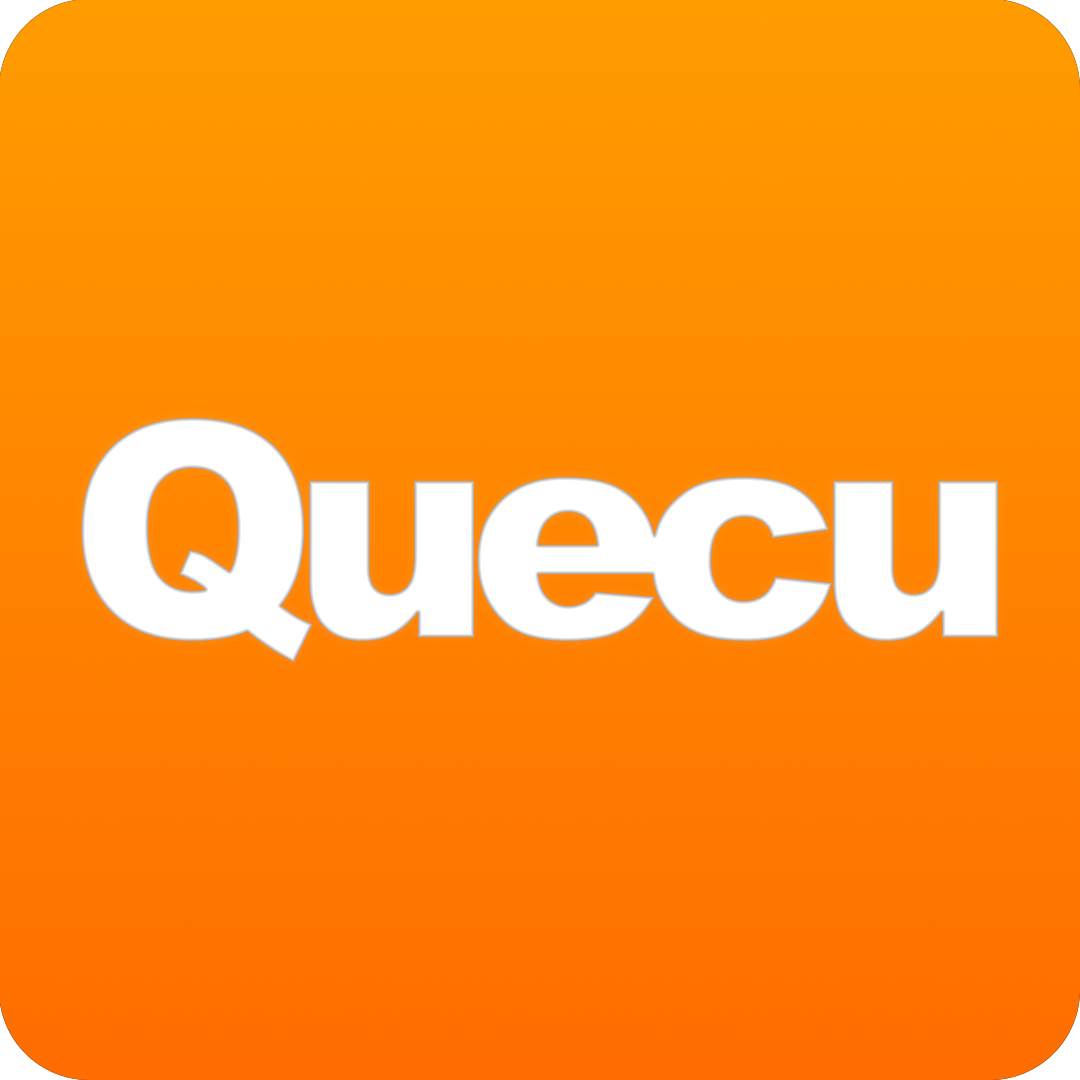
<style>
.page{position:relative;width:1080px;height:1080px}
.page>*{position:absolute;margin:0}
.t1{font:300px "Arial-Black";letter-spacing:-0.085em;color:#ffffff}
</style>
<div class="page">
<p class="t1" style="left:81px;top:418px;width:917px;height:244px">Quecu</p>
</div>
